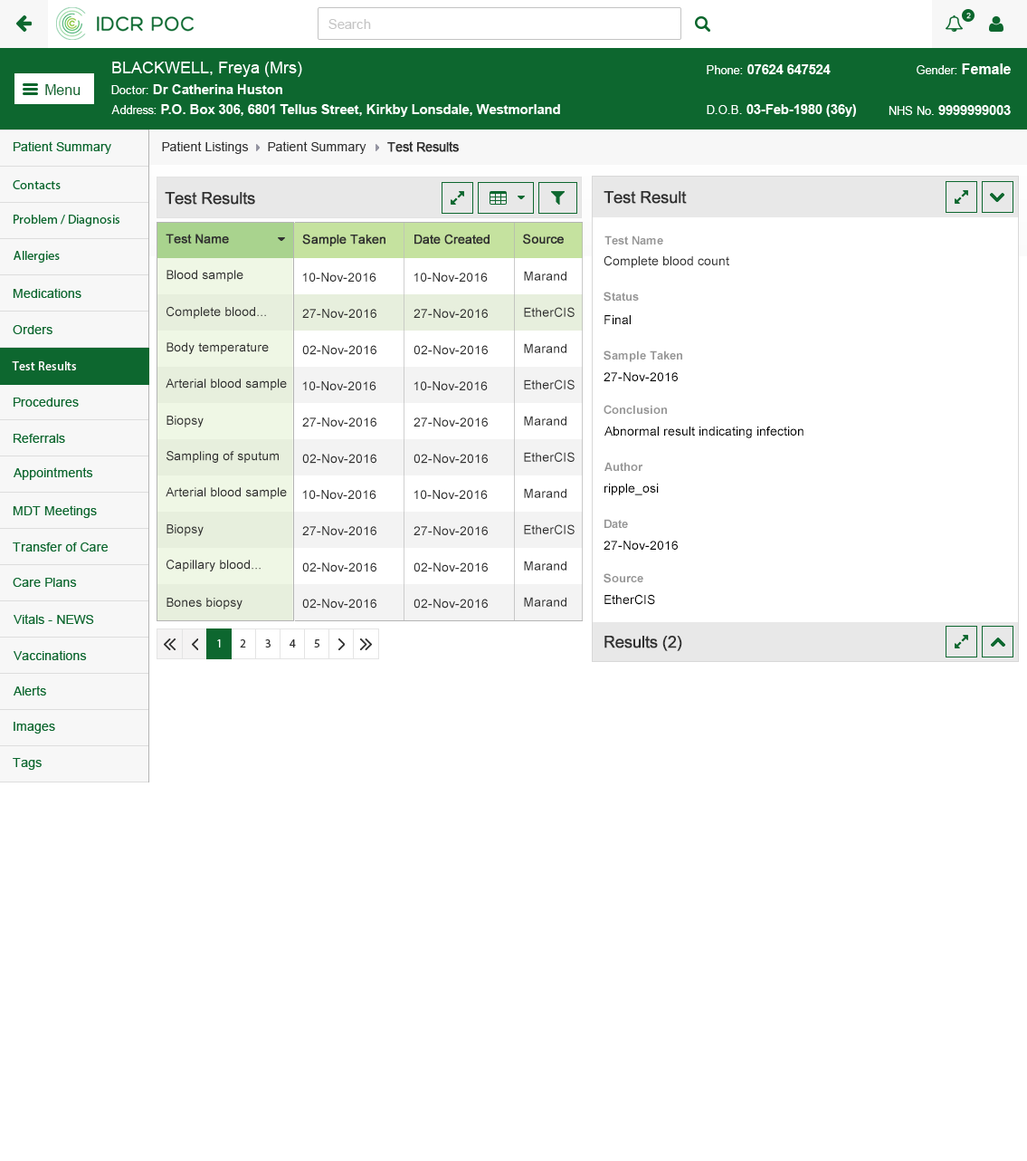
<style>
.page{position:relative;width:1027px;height:1161px;background:#ffffff}
.page>*{position:absolute;margin:0}
.t1{font:12.7px "ArialMT";color:#313131}
.t2{font:12.7px "ArialMT";color:#313131;font-weight:bold}
.t3{font:16.3px "ArialMT";color:#303030;font-weight:bold}
.t4{font:12.7px "ArialMT";color:#303030;font-weight:bold}
.t5{font:11.8px "Arial-BoldMT";color:#959595}
.t6{font:12.7px "ArialMT";color:#303030}
.t7{font:12.7px "ArialMT";color:#000000}
.t8{font:12.7px "MyriadPro-Regular";color:#ffffff}
</style>
<div class="page">
<p class="t1" style="left:162px;top:141px;width:87px;height:13px">Patient Listings</p>
<p class="t1" style="left:268px;top:141px;width:99px;height:13px">Patient Summary</p>
<p class="t2" style="left:387px;top:141px;width:72px;height:11px">Test Results</p>
<p class="t3" style="left:165px;top:192px;width:90px;height:13px">Test Results</p>
<p class="t3" style="left:604px;top:191px;width:83px;height:13px">Test Result</p>
<p class="t4" style="left:166px;top:234px;width:63px;height:10px">Test Name</p>
<p class="t4" style="left:302px;top:234px;width:84px;height:12px">Sample Taken</p>
<p class="t4" style="left:415px;top:234px;width:75px;height:10px">Date Created</p>
<p class="t4" style="left:523px;top:234px;width:41px;height:10px">Source</p>
<p class="t5" style="left:605px;top:235px;width:59px;height:9px">Test Name</p>
<p class="t6" style="left:604px;top:255px;width:126px;height:13px">Complete blood count</p>
<p class="t6" style="left:167px;top:270px;width:77px;height:12px">Blood sample</p>
<p class="t6" style="left:302px;top:272px;width:75px;height:10px">10-Nov-2016</p>
<p class="t6" style="left:414px;top:272px;width:74px;height:10px">10-Nov-2016</p>
<p class="t6" style="left:524px;top:271px;width:43px;height:10px">Marand</p>
<p class="t5" style="left:604px;top:291px;width:35px;height:10px">Status</p>
<p class="t6" style="left:167px;top:306px;width:99px;height:13px">Complete blood...</p>
<p class="t6" style="left:302px;top:309px;width:75px;height:9px">27-Nov-2016</p>
<p class="t6" style="left:414px;top:309px;width:74px;height:9px">27-Nov-2016</p>
<p class="t6" style="left:524px;top:307px;width:51px;height:10px">EtherCIS</p>
<p class="t7" style="left:605px;top:315px;width:26px;height:9px">Final</p>
<p class="t6" style="left:167px;top:342px;width:102px;height:12px">Body temperature</p>
<p class="t6" style="left:302px;top:345px;width:75px;height:10px">02-Nov-2016</p>
<p class="t6" style="left:414px;top:345px;width:74px;height:10px">02-Nov-2016</p>
<p class="t6" style="left:524px;top:343px;width:43px;height:10px">Marand</p>
<p class="t5" style="left:604px;top:350px;width:79px;height:12px">Sample Taken</p>
<p class="t8" style="left:12px;top:361px;width:64px;height:9px">Test Results</p>
<p class="t7" style="left:604px;top:372px;width:74px;height:9px">27-Nov-2016</p>
<p class="t6" style="left:166px;top:378px;width:121px;height:12px">Arterial blood sample</p>
<p class="t6" style="left:302px;top:381px;width:75px;height:9px">10-Nov-2016</p>
<p class="t6" style="left:414px;top:381px;width:74px;height:9px">10-Nov-2016</p>
<p class="t6" style="left:524px;top:379px;width:51px;height:10px">EtherCIS</p>
<p class="t5" style="left:604px;top:405px;width:63px;height:9px">Conclusion</p>
<p class="t6" style="left:167px;top:416px;width:37px;height:11px">Biopsy</p>
<p class="t6" style="left:302px;top:417px;width:75px;height:9px">27-Nov-2016</p>
<p class="t6" style="left:414px;top:417px;width:74px;height:9px">27-Nov-2016</p>
<p class="t6" style="left:524px;top:416px;width:43px;height:9px">Marand</p>
<p class="t7" style="left:605px;top:426px;width:199px;height:12px">Abnormal result indicating infection</p>
<p class="t6" style="left:167px;top:451px;width:112px;height:12px">Sampling of sputum</p>
<p class="t6" style="left:302px;top:454px;width:75px;height:9px">02-Nov-2016</p>
<p class="t6" style="left:414px;top:454px;width:74px;height:9px">02-Nov-2016</p>
<p class="t6" style="left:524px;top:452px;width:51px;height:10px">EtherCIS</p>
<p class="t5" style="left:605px;top:462px;width:39px;height:9px">Author</p>
<p class="t7" style="left:605px;top:483px;width:54px;height:12px">ripple_osi</p>
<p class="t6" style="left:166px;top:487px;width:121px;height:12px">Arterial blood sample</p>
<p class="t6" style="left:302px;top:490px;width:75px;height:9px">10-Nov-2016</p>
<p class="t6" style="left:414px;top:490px;width:74px;height:9px">10-Nov-2016</p>
<p class="t6" style="left:524px;top:488px;width:43px;height:10px">Marand</p>
<p class="t5" style="left:605px;top:519px;width:23px;height:9px">Date</p>
<p class="t6" style="left:167px;top:524px;width:37px;height:12px">Biopsy</p>
<p class="t6" style="left:302px;top:526px;width:75px;height:9px">27-Nov-2016</p>
<p class="t6" style="left:414px;top:526px;width:74px;height:9px">27-Nov-2016</p>
<p class="t6" style="left:524px;top:524px;width:51px;height:10px">EtherCIS</p>
<p class="t7" style="left:604px;top:540px;width:74px;height:9px">27-Nov-2016</p>
<p class="t6" style="left:167px;top:559px;width:94px;height:12px">Capillary blood...</p>
<p class="t6" style="left:302px;top:562px;width:75px;height:10px">02-Nov-2016</p>
<p class="t6" style="left:414px;top:562px;width:74px;height:10px">02-Nov-2016</p>
<p class="t6" style="left:524px;top:560px;width:43px;height:10px">Marand</p>
<p class="t5" style="left:604px;top:573px;width:40px;height:10px">Source</p>
<p class="t7" style="left:605px;top:594px;width:50px;height:11px">EtherCIS</p>
<p class="t6" style="left:167px;top:597px;width:76px;height:12px">Bones biopsy</p>
<p class="t6" style="left:302px;top:598px;width:75px;height:10px">02-Nov-2016</p>
<p class="t6" style="left:414px;top:598px;width:74px;height:10px">02-Nov-2016</p>
<p class="t6" style="left:524px;top:597px;width:43px;height:10px">Marand</p>
<p class="t3" style="left:605px;top:635px;width:78px;height:16px">Results (2)</p>
</div>
